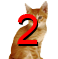
<style>
.page{position:relative;width:58px;height:59px;background:#ffffff}
.page>*{position:absolute;margin:0}
.t1{font:41.7px "ArialMT";color:#ff0101}
.t2{font:41.7px "ArialMT"}
</style>
<div class="page">
<p class="t1" style="left:17px;top:14px;width:21px;height:30px">2</p>
<p class="t2" style="left:18px;top:16px;width:21px;height:30px">2</p>
</div>
